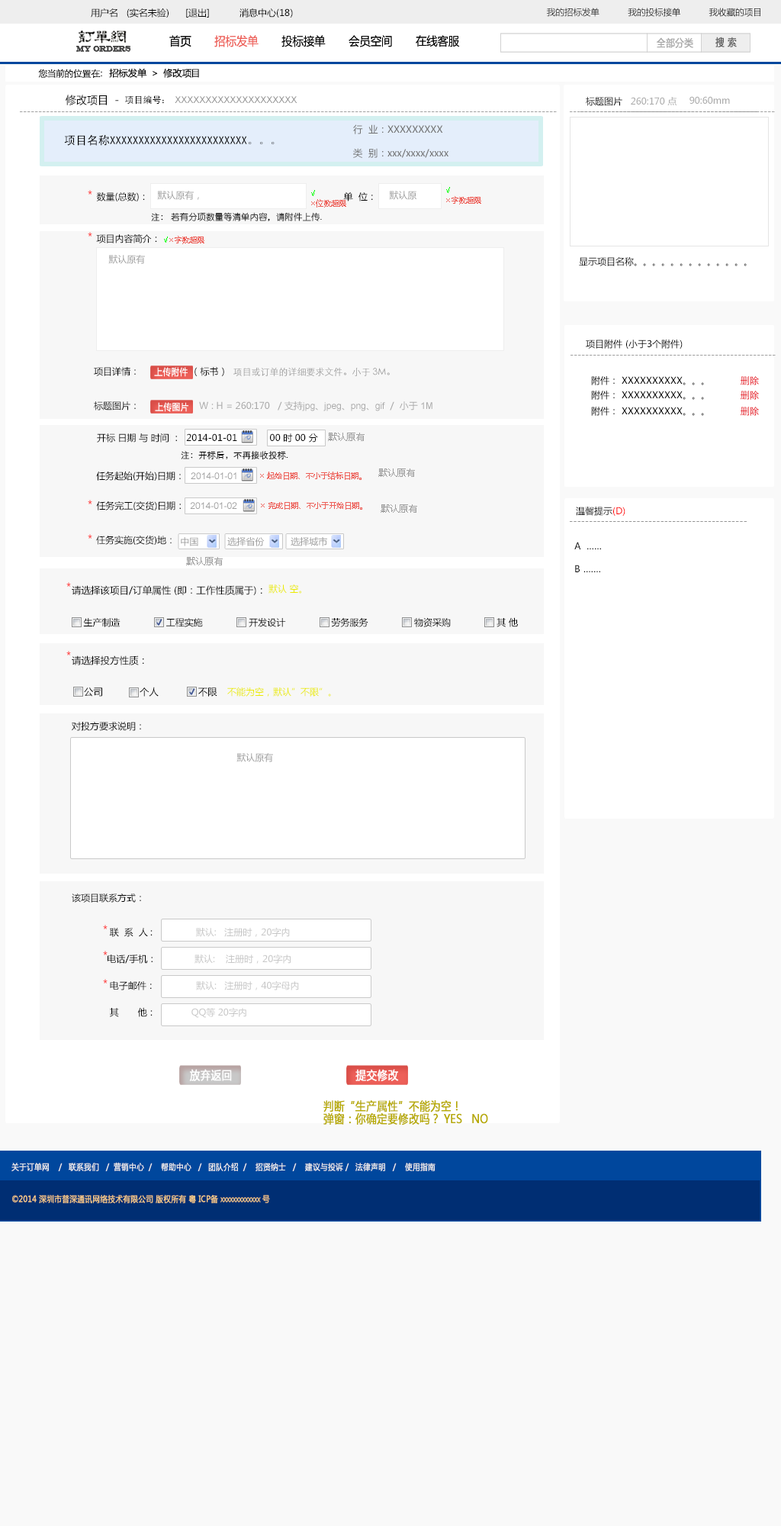
<style>
.page{position:relative;width:781px;height:1526px;background:#ffffff}
.page>*{position:absolute;margin:0}
.t1{font:9.2px "MicrosoftYaHei"}
.t2{font:9.2px "MicrosoftYaHei";color:#000000}
.t3{font:8.8px "MicrosoftYaHei";color:#000000}
.t4{font:11.8px "MicrosoftYaHei";color:#000000;font-variant:small-caps;scale:0.94 1}
.t5{font:11.8px "MicrosoftYaHei";color:#ed6059;font-variant:small-caps;scale:0.94 1}
.t6{font:10.1px "MicrosoftYaHei";color:#aaaaaa;font-variant:small-caps;font-weight:bold;scale:0.86 1}
.t7{font:10.1px "MicrosoftYaHei";color:#626262;font-variant:small-caps;font-weight:bold;scale:0.86 1}
.t8{font:7.6px "EngraversMT";color:#434343;font-variant:small-caps;font-weight:bold;scale:0.86 1}
.t9{font:9.2px "MicrosoftYaHei";color:#060606;scale:1.04 1}
.t10{font:9.2px "STXihei";color:#060606;scale:1.04 1}
.t11{font:10.7px "MicrosoftYaHei";color:#000000}
.t12{font:9.2px "ArialMT";color:#898989}
.t13{font:11.4px "SimHei";color:#000000}
.t14{font:9.2px "SimHei";color:#000000}
.t15{font:9.2px "MicrosoftYaHei";color:#aaaaaa}
.t16{font:9.2px "MicrosoftYaHei";color:#a0a0a0}
.t17{font:9.2px "MicrosoftYaHei";color:#959595}
.t18{font:9.5px "MicrosoftYaHei";color:#707070}
.t19{font:9.5px "SimHei";color:#000000}
.t20{font:10.7px "MicrosoftYaHei"}
.t21{font:8.8px "STXihei";color:#000000}
.t22{font:7.6px/9.9px "MicrosoftYaHei";color:#ed6059}
.t23{font:7.6px/9.9px "MicrosoftYaHei";color:#00ff00}
.t24{font:8.8px "YouYuan";color:#000000}
.t25{font:8.4px "STXihei";color:#000000}
.t26{font:7.6px "MicrosoftYaHei";color:#ed6059}
.t27{font:7.6px "MicrosoftYaHei";color:#00ff00}
.t28{font:9.2px/34.3px "MicrosoftYaHei";color:#000000}
.t29{font:9.2px/34.3px "STXihei";color:#919191}
.t30{font:9.2px/15.3px "MicrosoftYaHei";color:#000000}
.t31{font:9.2px/15.3px "MicrosoftYaHei";color:#aaaaaa}
.t32{font:9.2px/34.3px "MicrosoftYaHei";color:#aaaaaa}
.t33{font:9.2px/34.3px "ArialMT";color:#aaaaaa}
.t34{font:9.2px "MicrosoftYaHei";color:#ffffff;font-variant:small-caps;font-weight:bold;scale:0.86 1}
.t35{font:8.4px "STXihei";color:#959595}
.t36{font:9.2px "ArialMT";color:#a0a0a0}
.t37{font:9.2px "MicrosoftYaHei";color:#ff0000}
.t38{font:9.1px "MicrosoftYaHei";color:#000000}
.t39{font:9.2px/22.9px "MicrosoftYaHei";color:#000000}
.t40{font:9.5px "MicrosoftYaHei";color:#000000}
.t41{font:9.2px "MicrosoftYaHei";color:#ebeb00}
.t42{font:10.3px "MicrosoftYaHei";color:#000000}
.t43{font:8.8px/22.9px "STXihei";color:#000000}
.t44{font:9.2px/26.7px "MicrosoftYaHei";color:#000000}
.t45{font:9.2px/26.7px "MicrosoftYaHei";color:#c8c8c8}
.t46{font:9.2px/22.9px "MicrosoftYaHei";color:#c8c8c8}
.t47{font:11.8px "MicrosoftYaHei";color:#ffffff;font-variant:small-caps;font-weight:bold;scale:0.86 1}
.t48{font:11.8px "MicrosoftYaHei";color:#b7aa00;font-variant:small-caps;font-weight:bold;scale:0.86 1}
.t49{font:8.4px "MicrosoftYaHei";color:#eeeeee;font-variant:small-caps;font-weight:bold;scale:0.86 1}
.t50{font:11.8px "STXihei";color:#eeeeee;font-variant:small-caps;font-weight:bold;scale:0.86 1}
.t51{font:8.4px "MicrosoftYaHei";color:#facd89;font-variant:small-caps;font-weight:bold;scale:0.87 1}
.t52{font:8.4px "MicrosoftYaHei";color:#eeeeee;font-variant:small-caps;font-weight:bold;scale:0.87 1}
</style>
<div class="page">
<p class="t1" style="left:91px;top:8px;width:199px;height:10px">用户名   (实名未验)     [退出]           消息中心(18)</p>
<p class="t2" style="left:91px;top:8px;width:202px;height:10px">用户名   (实名未验)      [退出]           消息中心(18)</p>
<p class="t3" style="left:547px;top:8px;width:214px;height:9px">我的招标发单           我的投标接单           我收藏的项目</p>
<p class="t4" style="left:169px;top:35px;width:291px;height:12px">首页      <span class="t5"> 招标发单</span>       投标接单       会员空间       在线客服</p>
<p class="t4" style="left:169px;top:35px;width:291px;height:12px">首页       <span class="t5">招标发单  </span>     投标接单       会员空间       在线客服</p>
<p class="t6" style="left:657px;top:37px;width:37px;height:11px">全部分类</p>
<p class="t6" style="left:657px;top:37px;width:37px;height:11px">全部分类</p>
<p class="t7" style="left:716px;top:37px;width:21px;height:10px">搜 索</p>
<p class="t7" style="left:716px;top:37px;width:21px;height:10px">搜 索</p>
<p class="t8" style="left:76px;top:46px;width:55px;height:6px">MY ORDERS</p>
<p class="t8" style="left:76px;top:46px;width:55px;height:6px">MY ORDERS</p>
<p class="t9" style="left:38px;top:68px;width:161px;height:10px"><span class="t10">您当前的位置在：  </span>招标发单  &gt;  修改项目</p>
<p class="t11" style="left:66px;top:95px;width:53px;height:10px">修改项目  -</p>
<p class="t12" style="left:125px;top:95px;width:173px;height:10px"><span class="t13"> </span><span class="t14">项目编号： </span>XXXXXXXXXXXXXXXXXXXX</p>
<p class="t2" style="left:586px;top:97px;width:37px;height:9px">标题图片</p>
<p class="t15" style="left:631px;top:97px;width:46px;height:9px">260:170 点</p>
<p class="t15" style="left:690px;top:96px;width:40px;height:8px">90:60mm</p>
<p class="t16" style="left:20px;top:111px;width:537px;height:1px">---------------------------------------------------------------------------------------------------------------------------------------------</p>
<p class="t16" style="left:20px;top:111px;width:537px;height:1px">---------------------------------------------------------------------------------------------------------------------------------------------</p>
<p class="t16" style="left:570px;top:111px;width:205px;height:1px">------------------------------------------------------</p>
<p class="t17" style="left:581px;top:111px;width:177px;height:1px">---------------------------------------------</p>
<p class="t18" style="left:353px;top:124px;width:90px;height:10px">行  业：XXXXXXXXX</p>
<p class="t13" style="left:64px;top:134px;width:211px;height:12px"><span class="t19"><br></span>项目名称XXXXXXXXXXXXXXXXXXXXXXXX。。。</p>
<p class="t18" style="left:353px;top:148px;width:96px;height:10px">类  别：xxx/xxxx/xxxx</p>
<p class="t20" style="left:88px;top:190px;width:4px;height:5px">*</p>
<p class="t2" style="left:96px;top:192px;width:49px;height:9px"><span class="t21">                    <br><br>                    </span>数量(总数)：</p>
<p class="t16" style="left:157px;top:191px;width:42px;height:9px">默认原有，</p>
<p class="t22" style="left:311px;top:190px;width:35px;height:18px"><span class="t23">√<br></span>×位数超限</p>
<p class="t2" style="left:343px;top:192px;width:30px;height:9px"><span class="t21">                    <br><br>                    </span>  单  位：</p>
<p class="t16" style="left:389px;top:191px;width:28px;height:9px">默认原</p>
<p class="t22" style="left:446px;top:187px;width:35px;height:17px"><span class="t23">√<br></span>×字数超限</p>
<p class="t24" style="left:151px;top:212px;width:171px;height:9px"><span class="t25">                    <br><br>                    </span><span class="t21">注： </span>若有分项数量等清单内容，请附件上传.</p>
<p class="t20" style="left:88px;top:232px;width:4px;height:5px">*</p>
<p class="t2" style="left:96px;top:234px;width:61px;height:9px"><span class="t21">                    <br><br>                    </span>项目内容简介：</p>
<p class="t26" style="left:164px;top:236px;width:40px;height:8px"><span class="t27">√</span>×字数超限</p>
<p class="t16" style="left:108px;top:255px;width:37px;height:9px">默认原有</p>
<p class="t2" style="left:579px;top:257px;width:168px;height:9px">显示项目名称。。。。。。。。。。。。。</p>
<p class="t2" style="left:586px;top:340px;width:97px;height:9px">项目附件 (小于3个附件)</p>
<p class="t16" style="left:571px;top:355px;width:205px;height:1px">------------------------------------------------------</p>
<p class="t28" style="left:94px;top:367px;width:339px;height:44px">项目详情：                   （标书）  <span class="t29">项目或订单的详细要求文件。小于 3M。<br></span><span class="t30">标题图片：                      </span><span class="t31">W : H = 260:170   / </span><span class="t32">支持</span><span class="t33">jpg</span><span class="t32">、</span><span class="t33">jpeg</span><span class="t32">、</span><span class="t33">png</span><span class="t32">、</span><span class="t33">gif</span><span class="t32">  /  小于 </span><span class="t33">1M</span></p>
<p class="t34" style="left:154px;top:367px;width:34px;height:10px">上传附件</p>
<p class="t2" style="left:591px;top:376px;width:168px;height:9px">附件： XXXXXXXXXX。。。          删除</p>
<p class="t2" style="left:591px;top:391px;width:168px;height:9px">附件： XXXXXXXXXX。。。          删除</p>
<p class="t34" style="left:155px;top:402px;width:33px;height:10px">上传图片</p>
<p class="t2" style="left:591px;top:407px;width:168px;height:9px">附件： XXXXXXXXXX。。。          删除</p>
<p class="t2" style="left:97px;top:433px;width:221px;height:10px">开标 日期 与 时间 ：  2014-01-01            00 时 00 分</p>
<p class="t16" style="left:328px;top:433px;width:37px;height:8px">默认原有</p>
<p class="t21" style="left:181px;top:451px;width:107px;height:8px"><span class="t35">                    <br><br>                    </span>注：开标后，不再接收投标<span class="t24">.</span></p>
<p class="t2" style="left:96px;top:471px;width:85px;height:10px">任务起始(开始)日期：</p>
<p class="t36" style="left:191px;top:472px;width:46px;height:7px">2014-01-01</p>
<p class="t26" style="left:260px;top:472px;width:102px;height:8px">× 起始日期、不小于结标日期。</p>
<p class="t16" style="left:378px;top:469px;width:37px;height:8px">默认原有</p>
<p class="t20" style="left:88px;top:500px;width:4px;height:4px">*</p>
<p class="t2" style="left:96px;top:501px;width:141px;height:9px">任务完工(交货)日期：  <span class="t36">2014-01-02</span></p>
<p class="t26" style="left:261px;top:502px;width:101px;height:8px">× 完成日期、不小于开始日期。</p>
<p class="t16" style="left:381px;top:504px;width:36px;height:9px">默认原有</p>
<p class="t2" style="left:576px;top:507px;width:50px;height:9px">温馨提示<span class="t37">(D)</span></p>
<p class="t17" style="left:570px;top:521px;width:177px;height:1px">---------------------------------------------</p>
<p class="t20" style="left:88px;top:534px;width:4px;height:5px">*</p>
<p class="t38" style="left:96px;top:536px;width:76px;height:9px">任务实施(交货)地：</p>
<p class="t16" style="left:181px;top:537px;width:17px;height:9px">中国</p>
<p class="t16" style="left:227px;top:537px;width:38px;height:9px">选择省份</p>
<p class="t16" style="left:291px;top:536px;width:36px;height:10px">选择城市</p>
<p class="t39" style="left:575px;top:542px;width:26px;height:30px">A  ……<br>B .……</p>
<p class="t16" style="left:186px;top:557px;width:37px;height:8px">默认原有</p>
<p class="t20" style="left:66px;top:582px;width:5px;height:5px">*</p>
<p class="t40" style="left:72px;top:585px;width:190px;height:10px">请选择该项目/订单属性 (即：工作性质属于)：</p>
<p class="t41" style="left:269px;top:584px;width:32px;height:10px">默认 空。</p>
<p class="t2" style="left:83px;top:617px;width:435px;height:10px"><span class="t42"><br></span>生产制造                 工程实施                 开发设计                 劳务服务                 物资采购                 其 他</p>
<p class="t20" style="left:66px;top:651px;width:5px;height:4px">*</p>
<p class="t40" style="left:72px;top:655px;width:72px;height:10px">请选择投方性质：</p>
<p class="t40" style="left:84px;top:687px;width:133px;height:10px">公司             个人              不限</p>
<p class="t41" style="left:227px;top:687px;width:104px;height:10px">不能为空，默认”不限”。</p>
<p class="t28" style="left:72px;top:722px;width:227px;height:296px"><span class="t43"><br></span><br><br><br><br><br>对投方要求说明：<br><br><br><br><br>该项目联系方式：<br>             <span class="t44"> 联  系  人 :                </span><span class="t45">默认:   注册时，20字内<br></span><span class="t44">             电话/手机：              </span><span class="t45">默认:    注册时，20字内<br></span><span class="t44">              电子邮件：               </span><span class="t45">默认:   注册时，40字母内<br></span><span class="t44">              其       他：             </span><span class="t46">QQ等 20字内</span></p>
<p class="t16" style="left:237px;top:753px;width:36px;height:9px">默认原有</p>
<p class="t20" style="left:103px;top:925px;width:5px;height:4px">*</p>
<p class="t20" style="left:103px;top:951px;width:5px;height:4px">*</p>
<p class="t20" style="left:103px;top:979px;width:5px;height:5px">*</p>
<p class="t47" style="left:189px;top:1069px;width:43px;height:12px">放弃返回</p>
<p class="t47" style="left:356px;top:1069px;width:43px;height:12px">提交修改</p>
<p class="t48" style="left:324px;top:1100px;width:164px;height:25px">判断“生产属性”不能为空！<br>弹窗：你确定要修改吗？ YES   NO</p>
<p class="t49" style="left:11px;top:1162px;width:425px;height:9px"><span class="t50"><br><br></span>关于订单网    /   联系我们   /  营销中心  /    帮助中心   /   团队介绍  /    招贤纳士   /    建议与投诉 /   法律声明   /    使用指南</p>
<p class="t51" style="left:12px;top:1195px;width:258px;height:8px"><span class="t52"> </span>©2014 深圳市普深通讯网络技术有限公司 版权所有 粤 ICP备 xxxxxxxxxxxxx 号</p>
</div>
